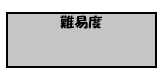
<style>
.page{position:relative;width:162px;height:72px;background:#c5c5c5}
.page>*{position:absolute;margin:0}
.t1{font:14px "HGPSoeiKakupoptai";color:#000000}
</style>
<div class="page">
<p class="t1" style="left:60px;top:15px;width:42px;height:14px">難易度</p>
</div>
